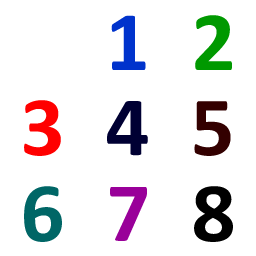
<style>
.page{position:relative;width:256px;height:256px;background:#ffffff}
.page>*{position:absolute;margin:0}
.t1{font:85.3px "Calibri-Bold";color:#0033cc}
.t2{font:85.3px "Calibri-Bold";color:#009900}
.t3{font:85.3px "Calibri-Bold";color:#ff0000}
.t4{font:85.3px "Calibri-Bold";color:#000033}
.t5{font:85.3px "Calibri-Bold";color:#330000}
.t6{font:85.3px "Calibri-Bold";color:#006666}
.t7{font:85.3px "Calibri-Bold";color:#990099}
.t8{font:85.3px "Calibri-Bold";color:#000000}
</style>
<div class="page">
<p class="t1" style="left:111px;top:15px;width:35px;height:55px">1</p>
<p class="t2" style="left:195px;top:15px;width:37px;height:55px">2</p>
<p class="t3" style="left:24px;top:100px;width:37px;height:56px">3</p>
<p class="t4" style="left:107px;top:101px;width:41px;height:55px">4</p>
<p class="t5" style="left:194px;top:101px;width:37px;height:55px">5</p>
<p class="t6" style="left:24px;top:186px;width:38px;height:56px">6</p>
<p class="t7" style="left:110px;top:187px;width:37px;height:54px">7</p>
<p class="t8" style="left:194px;top:186px;width:39px;height:56px">8</p>
</div>
